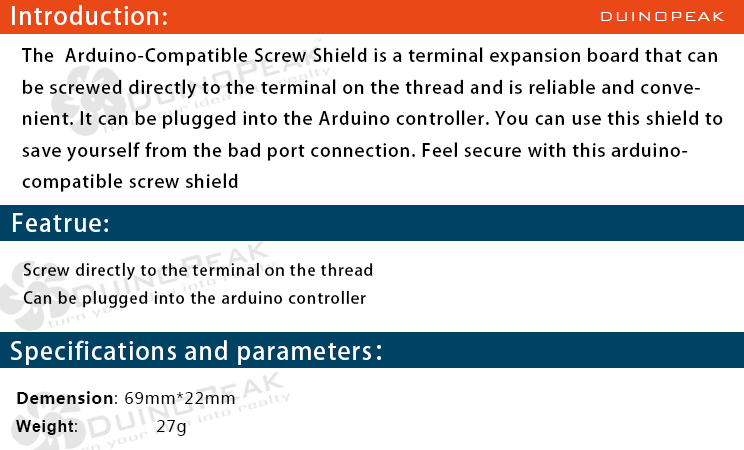
<style>
.page{position:relative;width:744px;height:450px;background:#ffffff}
.page>*{position:absolute;margin:0}
.t1{font:24px "AdobeHeitiStd-Regular";letter-spacing:0.05em;color:#ffffff}
.t2{font:18px "BankGothicBT-Light";letter-spacing:0.05em;color:#ffffff}
.t3{font:18px "AdobeHeitiStd-Regular";letter-spacing:0.05em;color:#000000}
.t4{font:16px "AdobeHeitiStd-Regular";letter-spacing:0.05em;color:#000000}
.t5{font:16px "MicrosoftYaHei";letter-spacing:0.05em;color:#000000}
.t6{font:16px "MicrosoftYaHei-Bold";letter-spacing:0.05em;color:#000000}
.t7{font:16px "Arial-BoldMT";letter-spacing:0.05em;color:#000000}
</style>
<div class="page">
<p class="t1" style="left:12px;top:5px;width:155px;height:20px">Introduction:</p>
<p class="t2" style="left:601px;top:12px;width:124px;height:9px">DUINOPEAK</p>
<p class="t3" style="left:21px;top:47px;width:702px;height:145px">The  Arduino-Compatible Screw Shield is a terminal expansion board that can <br>be screwed directly to the terminal on the thread and is reliable and conve-<br>nient. It can be plugged into the Arduino controller. You can use this shield to <br>save yourself from the bad port connection. Feel secure with this arduino-<br>compatible screw shield</p>
<p class="t1" style="left:13px;top:213px;width:95px;height:19px">Featrue:</p>
<p class="t4" style="left:23px;top:262px;width:350px;height:46px">Screw directly to the terminal on the thread<br>Can be plugged into the arduino controller</p>
<p class="t1" style="left:11px;top:340px;width:370px;height:25px">Specifications and parameters：</p>
<p class="t5" style="left:16px;top:391px;width:219px;height:45px"><span class="t6">Demension</span>: 69mm*22mm<br><span class="t7">Weight</span>:              27g</p>
</div>
